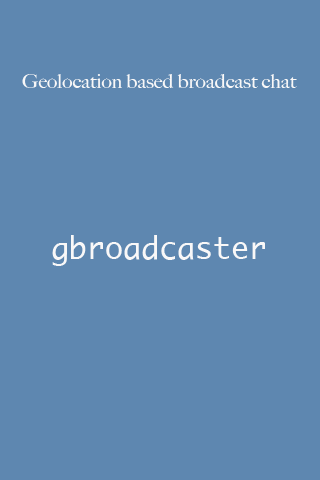
<style>
.page{position:relative;width:320px;height:480px;background:#5e87b0}
.page>*{position:absolute;margin:0}
.t1{font:20px "BigCaslon-Medium";color:#f9f8f8}
.t2{font:30px "Ayuthaya";color:#f9f8f8}
</style>
<div class="page">
<p class="t1" style="left:22px;top:74px;width:275px;height:14px">Geolocation based broadcast chat</p>
<p class="t2" style="left:52px;top:235px;width:213px;height:31px">gbroadcaster</p>
</div>
